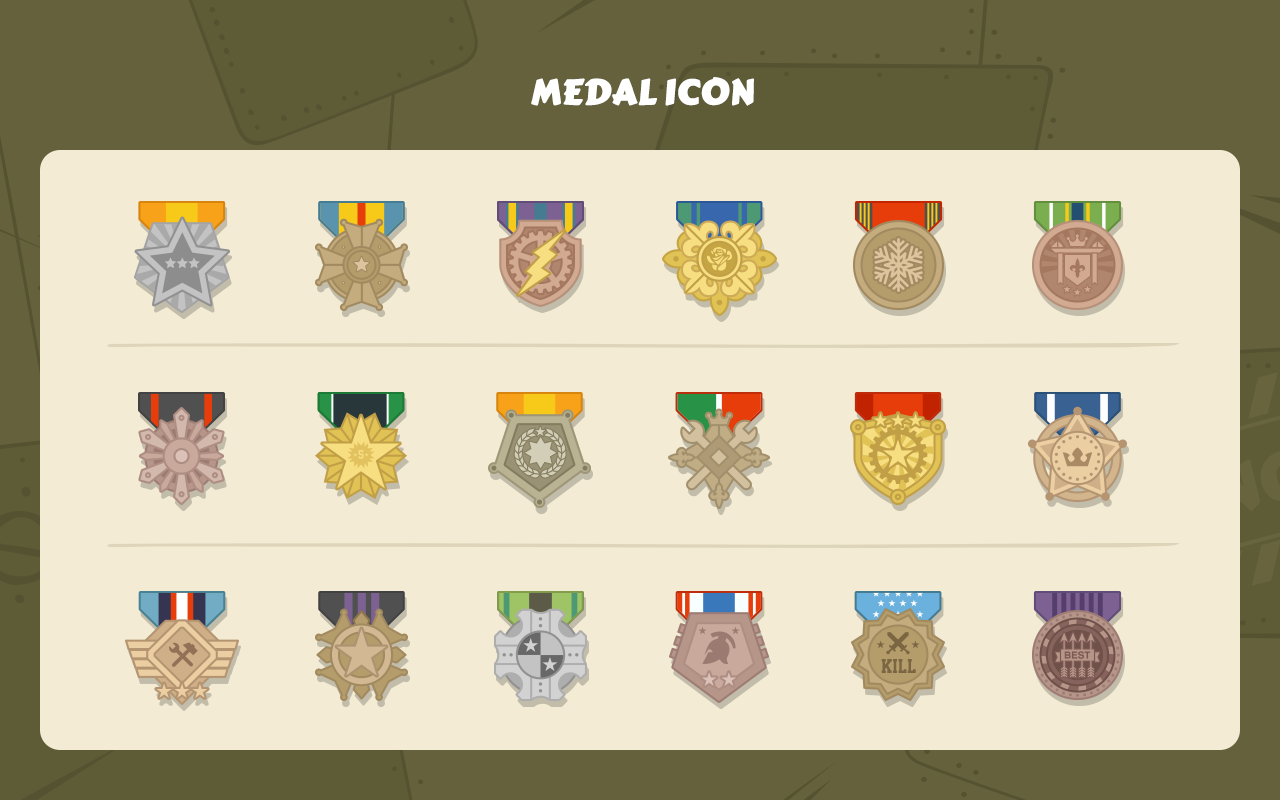
<style>
.page{position:relative;width:1280px;height:800px;background:#f3ebd4}
.page>*{position:absolute;margin:0}
.t1{font:34.2px "CarterOne";letter-spacing:-0.025em;color:#ffffff;text-transform:uppercase;font-weight:bold;scale:1.06 1}
</style>
<div class="page">
<p class="t1" style="left:531px;top:77px;width:223px;height:29px">Medal ICON</p>
</div>
